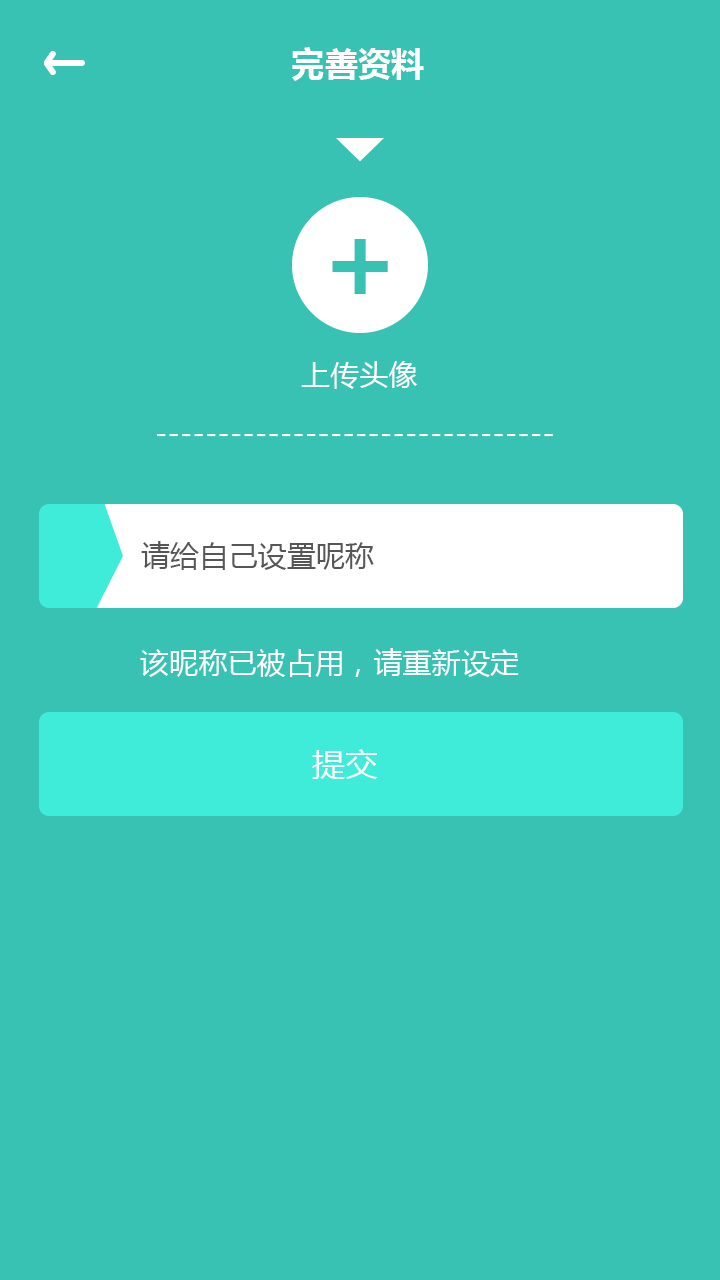
<style>
.page{position:relative;width:720px;height:1280px;background:#38c2b3}
.page>*{position:absolute;margin:0}
.t1{font:33.3px "MicrosoftYaHei-Bold";color:#fefefe}
.t2{font:107.7px "MicrosoftYaHei-Bold";color:#38c2b3}
.t3{font:29.2px "MicrosoftYaHei";color:#fefefe}
.t4{font:29.2px "MicrosoftYaHei";color:#565656}
.t5{font:33.3px "MicrosoftYaHei";color:#fefefe}
</style>
<div class="page">
<p class="t1" style="left:291px;top:47px;width:133px;height:34px">完善资料</p>
<p class="t2" style="left:332px;top:239px;width:56px;height:55px">+</p>
<p class="t3" style="left:301px;top:361px;width:116px;height:28px">上传头像</p>
<p class="t4" style="left:141px;top:541px;width:233px;height:29px">请给自己设置呢称</p>
<p class="t3" style="left:140px;top:648px;width:379px;height:29px">该昵称已被占用，请重新设定</p>
<p class="t5" style="left:312px;top:749px;width:66px;height:30px">提交</p>
</div>
